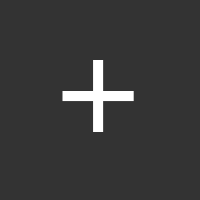
<style>
.page{position:relative;width:200px;height:200px;background:#333333}
.page>*{position:absolute;margin:0}
.t1{font:155px "SegoeUI";letter-spacing:0.06em;color:#ffffff}
</style>
<div class="page">
<p class="t1" style="left:62px;top:60px;width:72px;height:72px">+</p>
</div>
